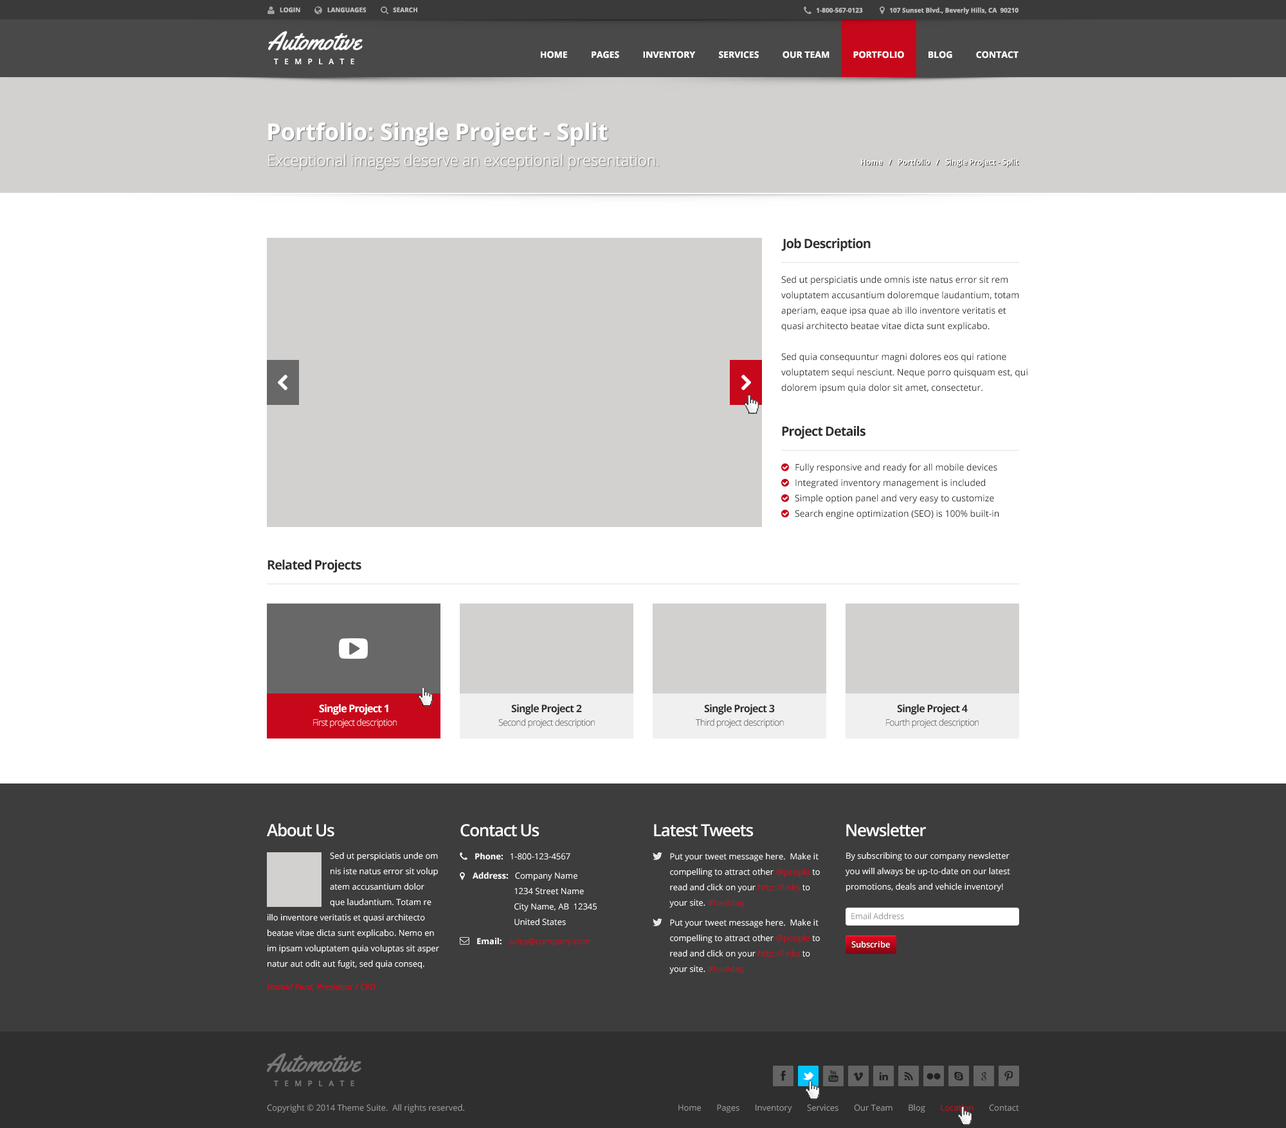
<style>
.page{position:relative;width:1286px;height:1128px;background:#ffffff}
.page>*{position:absolute;margin:0}
.t1{font:6.4px "OpenSans-Bold";color:#c0c0c0}
.t2{font:25.7px "Yellowtail";color:#ffffff}
.t3{font:9px "OpenSans-Bold";color:#ffffff}
.t4{font:23.1px "OpenSans-Bold";color:#ffffff}
.t5{font:15.4px "OpenSans-Light";color:#ffffff}
.t6{font:7.7px "OpenSans-Semibold";color:#ffffff}
.t7{font:12.9px "OpenSans-Bold";letter-spacing:-0.05em;color:#2e2e2e}
.t8{font:9px/15.4px "OpenSans";color:#2d2d2d}
.t9{font:10.3px "OpenSans-Bold";letter-spacing:-0.05em;color:#ffffff}
.t10{font:10.3px "OpenSans-Bold";letter-spacing:-0.05em;color:#2e2e2e}
.t11{font:9px "OpenSans-Light";letter-spacing:-0.05em}
.t12{font:9px "OpenSans-Light";letter-spacing:-0.05em;color:#ffffff}
.t13{font:9px "OpenSans-Light";letter-spacing:-0.05em;color:#2e2e2e}
.t14{font:16.7px "OpenSans-Semibold";letter-spacing:-0.05em;color:#ffffff}
.t15{font:8.4px/15.4px "OpenSans";color:#ffffff}
.t16{font:8.4px "OpenSans";color:#ffffff}
.t17{font:8.4px "OpenSans-Bold";color:#ffffff}
.t18{font:8.4px/15.4px "OpenSans";color:#c7081b}
.t19{font:8.4px/12.9px "OpenSans-Bold";color:#ffffff}
.t20{font:8.4px/23.1px "OpenSans-SemiboldItalic";color:#c7081b}
.t21{font:8.4px "OpenSans";color:#999999}
.t22{font:8.4px "OpenSans";color:#c7081b}
.t23{font:8.4px "OpenSans-Semibold";color:#ffffff}
.t24{font:25.7px "Yellowtail";color:#787878}
.t25{font:7.7px "OpenSans-Semibold";color:#787878}
</style>
<div class="page">
<p class="t1" style="left:280px;top:7px;width:137px;height:6px">LOGIN                LANGUAGES                SEARCH</p>
<p class="t1" style="left:816px;top:7px;width:202px;height:7px">1-800-567-0123                107 Sunset Blvd., Beverly Hills, CA  90210</p>
<p class="t2" style="left:268px;top:31px;width:95px;height:20px">Automotive</p>
<p class="t3" style="left:541px;top:51px;width:477px;height:8px">HOME          PAGES          INVENTORY          SERVICES          OUR TEAM          PORTFOLIO          BLOG          CONTACT</p>
<p class="t4" style="left:268px;top:122px;width:340px;height:24px">Portfolio: Single Project - Split</p>
<p class="t5" style="left:268px;top:154px;width:390px;height:16px">Exceptional images deserve an exceptional presentation.</p>
<p class="t6" style="left:861px;top:159px;width:157px;height:8px">Home   /   Portfolio   /   Single Project - Split</p>
<p class="t7" style="left:781px;top:238px;width:89px;height:13px">Job Description</p>
<p class="t8" style="left:781px;top:276px;width:246px;height:117px">Sed ut perspiciatis unde omnis iste natus error sit rem <br>voluptatem accusantium doloremque laudantium, totam<br>aperiam, eaque ipsa quae ab illo inventore veritatis et<br>quasi architecto beatae vitae dicta sunt explicabo.<br><br>Sed quia consequuntur magni dolores eos qui ratione<br>voluptatem sequi nesciunt. Neque porro quisquam est, qui <br>dolorem ipsum quia dolor sit amet, consectetur.</p>
<p class="t7" style="left:782px;top:426px;width:83px;height:13px">Project Details</p>
<p class="t8" style="left:795px;top:464px;width:204px;height:55px">Fully responsive and ready for all mobile devices<br>Integrated inventory management is included<br>Simple option panel and very easy to customize<br>Search engine optimization (SEO) is 100% built-in</p>
<p class="t7" style="left:267px;top:559px;width:94px;height:14px">Related Projects</p>
<p class="t9" style="left:319px;top:704px;width:69px;height:11px">Single Project 1</p>
<p class="t9" style="left:319px;top:704px;width:69px;height:11px">Single Project 1</p>
<p class="t10" style="left:511px;top:704px;width:71px;height:11px">Single Project 2</p>
<p class="t10" style="left:704px;top:704px;width:71px;height:11px">Single Project 3</p>
<p class="t10" style="left:897px;top:704px;width:71px;height:11px">Single Project 4</p>
<p class="t11" style="left:313px;top:719px;width:84px;height:9px">First project description</p>
<p class="t12" style="left:313px;top:719px;width:84px;height:9px">First project description</p>
<p class="t13" style="left:498px;top:719px;width:97px;height:9px">Second project description</p>
<p class="t13" style="left:696px;top:719px;width:88px;height:9px">Third project description</p>
<p class="t11" style="left:886px;top:719px;width:92px;height:9px">Fourth project description</p>
<p class="t14" style="left:267px;top:824px;width:67px;height:13px">About Us</p>
<p class="t14" style="left:460px;top:824px;width:79px;height:13px">Contact Us</p>
<p class="t14" style="left:654px;top:824px;width:99px;height:13px">Latest Tweets</p>
<p class="t14" style="left:846px;top:824px;width:80px;height:13px">Newsletter</p>
<p class="t15" style="left:330px;top:852px;width:108px;height:55px">Sed ut perspiciatis unde om<br>nis iste natus error sit volup<br>atem accusantium dolor<br>que laudantium. Totam re</p>
<p class="t16" style="left:475px;top:853px;width:95px;height:7px"><span class="t17">Phone:   </span>1-800-123-4567</p>
<p class="t15" style="left:669px;top:853px;width:151px;height:55px">Put your tweet message here.  Make it <br>compelling to attract other <span class="t18">@people </span>to <br>read and click on your <span class="t18">http://links </span>to <br>your site. <span class="t18">#hashtag</span></p>
<p class="t15" style="left:845px;top:852px;width:165px;height:40px">By subscribing to our company newsletter<br>you will always be up-to-date on our latest<br>promotions, deals and vehicle inventory!</p>
<p class="t15" style="left:473px;top:872px;width:124px;height:54px"><span class="t19">Address:   </span>Company Name<br>                   1234 Street Name<br>                   City Name, AB  12345<br>                   United States</p>
<p class="t15" style="left:267px;top:914px;width:172px;height:77px">illo inventore veritatis et quasi architecto <br>beatae vitae dicta sunt explicabo. Nemo en<br>im ipsam voluptatem quia voluptas sit asper<br>natur aut odit aut fugit, sed quia conseq.<br><span class="t20">Harold Ford, President / CEO</span></p>
<p class="t21" style="left:851px;top:913px;width:53px;height:7px">Email Address</p>
<p class="t15" style="left:669px;top:919px;width:151px;height:55px">Put your tweet message here.  Make it <br>compelling to attract other <span class="t18">@people </span>to <br>read and click on your <span class="t18">http://links </span>to <br>your site. <span class="t18">#hashtag</span></p>
<p class="t22" style="left:477px;top:938px;width:113px;height:8px"><span class="t17">Email:   </span>sales@company.com</p>
<p class="t23" style="left:851px;top:941px;width:39px;height:7px">Subscribe</p>
<p class="t24" style="left:267px;top:1053px;width:94px;height:20px">Automotive</p>
<p class="t25" style="left:274px;top:1081px;width:80px;height:5px">T   E   M   P   L   A   T   E</p>
<p class="t21" style="left:267px;top:1104px;width:197px;height:9px">Copyright © 2014 Theme Suite.  All rights reserved.</p>
<p class="t21" style="left:678px;top:1104px;width:341px;height:9px">Home       Pages       Inventory       Services       Our Team       Blog       <span class="t22">Location       </span>Contact</p>
</div>
